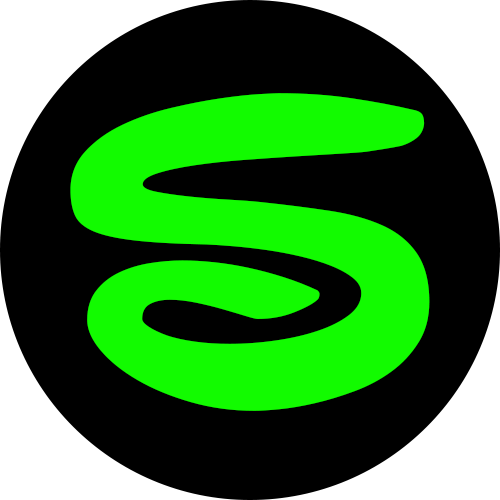
<style>
.page{position:relative;width:500px;height:500px;background:#000000}
.page>*{position:absolute;margin:0}
.t1{font:445.5px "WaltographUI-Bold";color:#12fb00;scale:1.17 1}
</style>
<div class="page">
<p class="t1" style="left:70px;top:93px;width:360px;height:318px">S</p>
</div>
